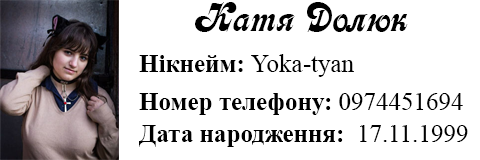
<style>
.page{position:relative;width:480px;height:160px;background:#ffffff}
.page>*{position:absolute;margin:0}
.t1{font:41.7px "Asessor";color:#000000}
.t2{font:25px "TimesNewRomanPSMT";color:#000000}
.t3{font:25px "TimesNewRomanPS-BoldMT";color:#000000}
</style>
<div class="page">
<p class="t1" style="left:195px;top:2px;width:213px;height:30px">Катя Долюк</p>
<p class="t2" style="left:139px;top:54px;width:215px;height:23px"><span class="t3">Нікнейм: </span>Yoka-tyan</p>
<p class="t3" style="left:139px;top:93px;width:324px;height:22px">Номер телефону:<span class="t2"> 0974451694</span></p>
<p class="t3" style="left:139px;top:125px;width:329px;height:22px">Дата народження:  <span class="t2">17.11.1999</span></p>
</div>
